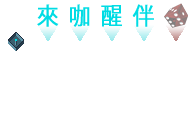
<style>
.page{position:relative;width:192px;height:128px;background:#ffffff}
.page>*{position:absolute;margin:0}
.t1{font:24px "KozGoPr6N-Regular";letter-spacing:0.01em;color:#00dce4;font-weight:bold;scale:0.9 1}
</style>
<div class="page">
<p class="t1" style="left:37px;top:4px;width:22px;height:23px">來</p>
<p class="t1" style="left:70px;top:4px;width:20px;height:23px">咖</p>
<p class="t1" style="left:101px;top:5px;width:21px;height:22px">醒</p>
<p class="t1" style="left:132px;top:4px;width:22px;height:23px">伴</p>
</div>
